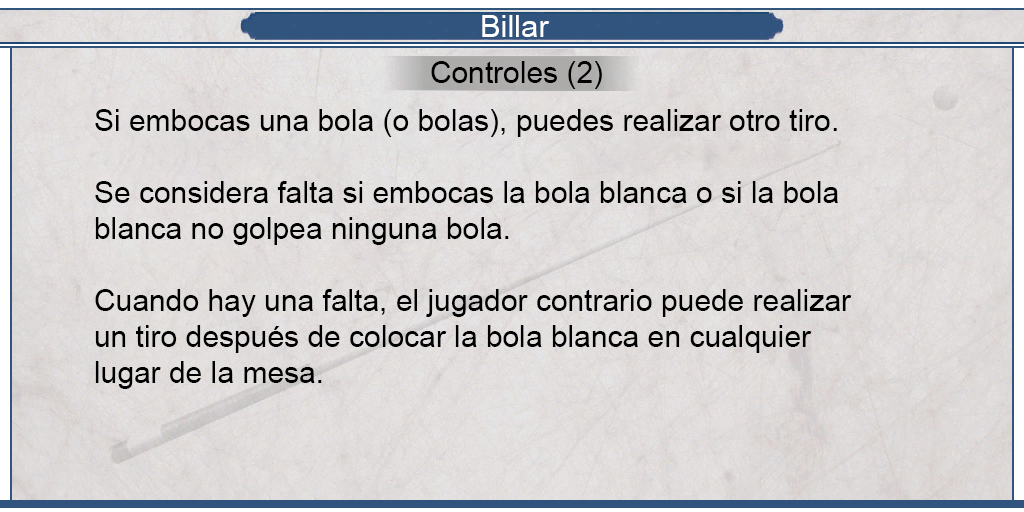
<style>
.page{position:relative;width:1024px;height:512px}
.page>*{position:absolute;margin:0}
.t1{font:30.8px "ArialMT";color:#ffffff}
.t2{font:30px "ArialMT";color:#000000}
</style>
<div class="page">
<p class="t1" style="left:482px;top:15px;width:68px;height:22px">Billar</p>
<p class="t2" style="left:431px;top:61px;width:171px;height:28px">Controles (2)</p>
<p class="t2" style="left:95px;top:109px;width:757px;height:280px;text-align:justify">Si embocas una bola (o bolas), puedes realizar otro tiro.<br><br>Se considera falta si embocas la bola blanca o si la bola<br>blanca no golpea ninguna bola.<br><br>Cuando hay una falta, el jugador contrario puede realizar<br>un tiro después de colocar la bola blanca en cualquier<br>lugar de la mesa.</p>
</div>
